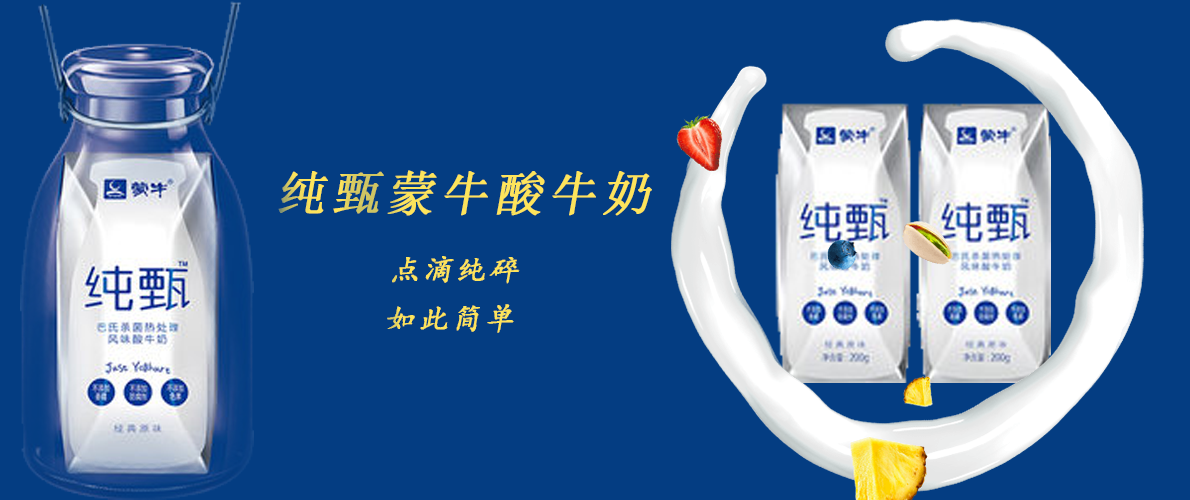
<style>
.page{position:relative;width:1190px;height:500px;background:#043d82}
.page>*{position:absolute;margin:0}
.t1{font:48px "SimSun";letter-spacing:0.1em;color:#fde45b;text-transform:uppercase;font-weight:bold;font-style:italic}
.t2{font:30px "¿¬Ìå";letter-spacing:0.1em;color:#fde45b;text-transform:uppercase;font-weight:bold;font-style:italic}
</style>
<div class="page">
<p class="t1" style="left:278px;top:170px;width:374px;height:46px">纯甄蒙牛酸牛奶</p>
<p class="t2" style="left:392px;top:256px;width:128px;height:28px">点滴纯碎</p>
<p class="t2" style="left:387px;top:304px;width:127px;height:29px">如此简单</p>
</div>
